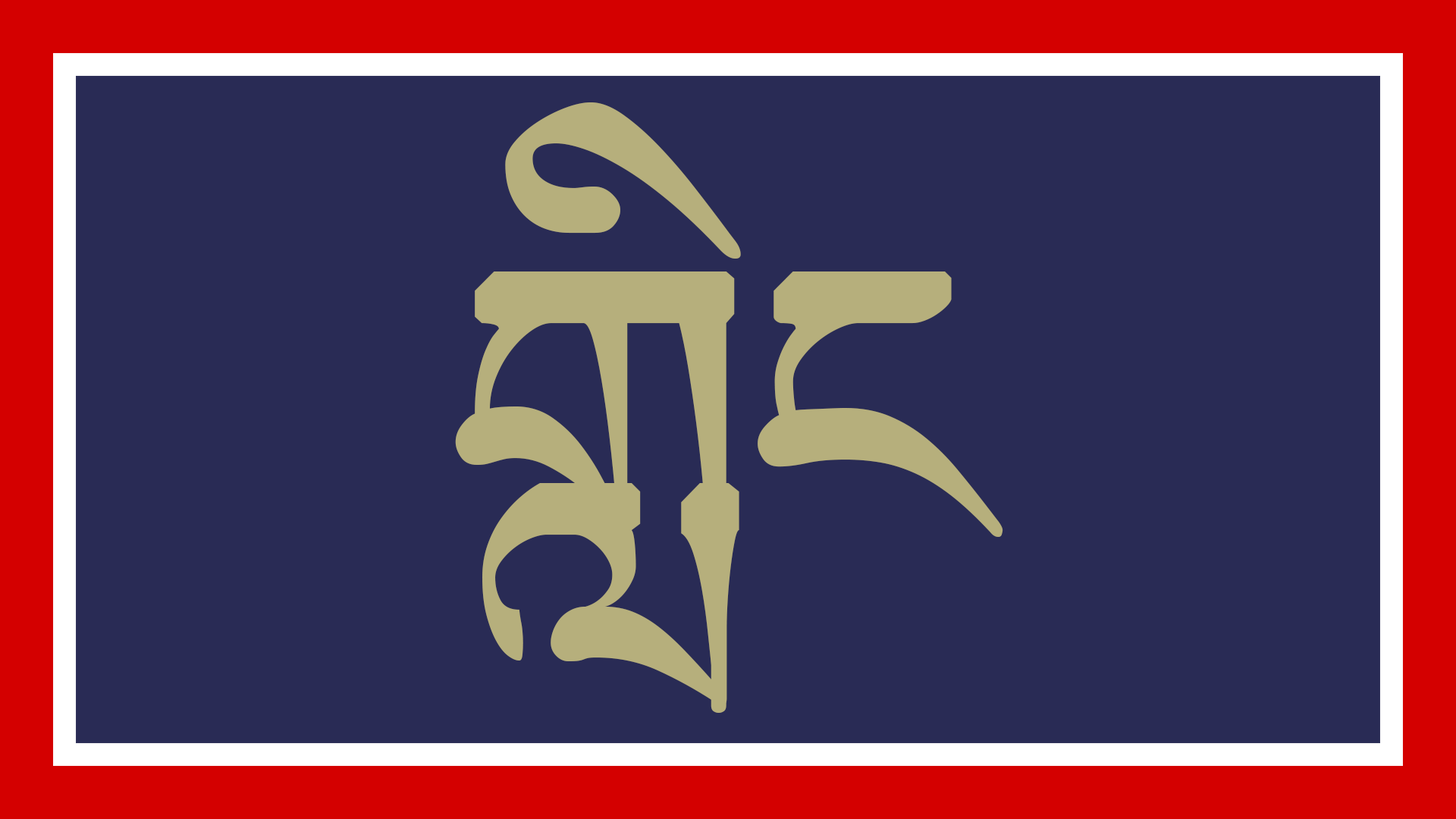
<style>
.page{position:relative;width:1456px;height:819px;background:#292b55}
.page>*{position:absolute;margin:0}
.t1{font:547.4px "Tibetan_Machine_Uni";color:#b6af7c}
</style>
<div class="page">
<p class="t1" style="left:455px;top:102px;width:548px;height:611px">གླིང</p>
</div>
